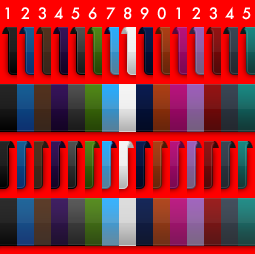
<style>
.page{position:relative;width:255px;height:254px}
.page>*{position:absolute;margin:0}
.t1{font:15.3px "Futura-Medium";color:#ffffff}
</style>
<div class="page">
<p class="t1" style="left:54px;top:6px;width:9px;height:13px">4</p>
<p class="t1" style="left:225px;top:6px;width:9px;height:13px">4</p>
<p class="t1" style="left:5px;top:7px;width:4px;height:12px">1</p>
<p class="t1" style="left:21px;top:7px;width:8px;height:12px">2</p>
<p class="t1" style="left:38px;top:7px;width:8px;height:13px">3</p>
<p class="t1" style="left:71px;top:7px;width:9px;height:13px">5</p>
<p class="t1" style="left:88px;top:7px;width:9px;height:13px">6</p>
<p class="t1" style="left:106px;top:7px;width:10px;height:13px">7</p>
<p class="t1" style="left:124px;top:7px;width:8px;height:13px">8</p>
<p class="t1" style="left:140px;top:7px;width:9px;height:13px">9</p>
<p class="t1" style="left:157px;top:7px;width:9px;height:13px">0</p>
<p class="t1" style="left:176px;top:7px;width:4px;height:12px">1</p>
<p class="t1" style="left:192px;top:7px;width:8px;height:12px">2</p>
<p class="t1" style="left:209px;top:7px;width:8px;height:13px">3</p>
<p class="t1" style="left:242px;top:7px;width:9px;height:13px">5</p>
</div>
